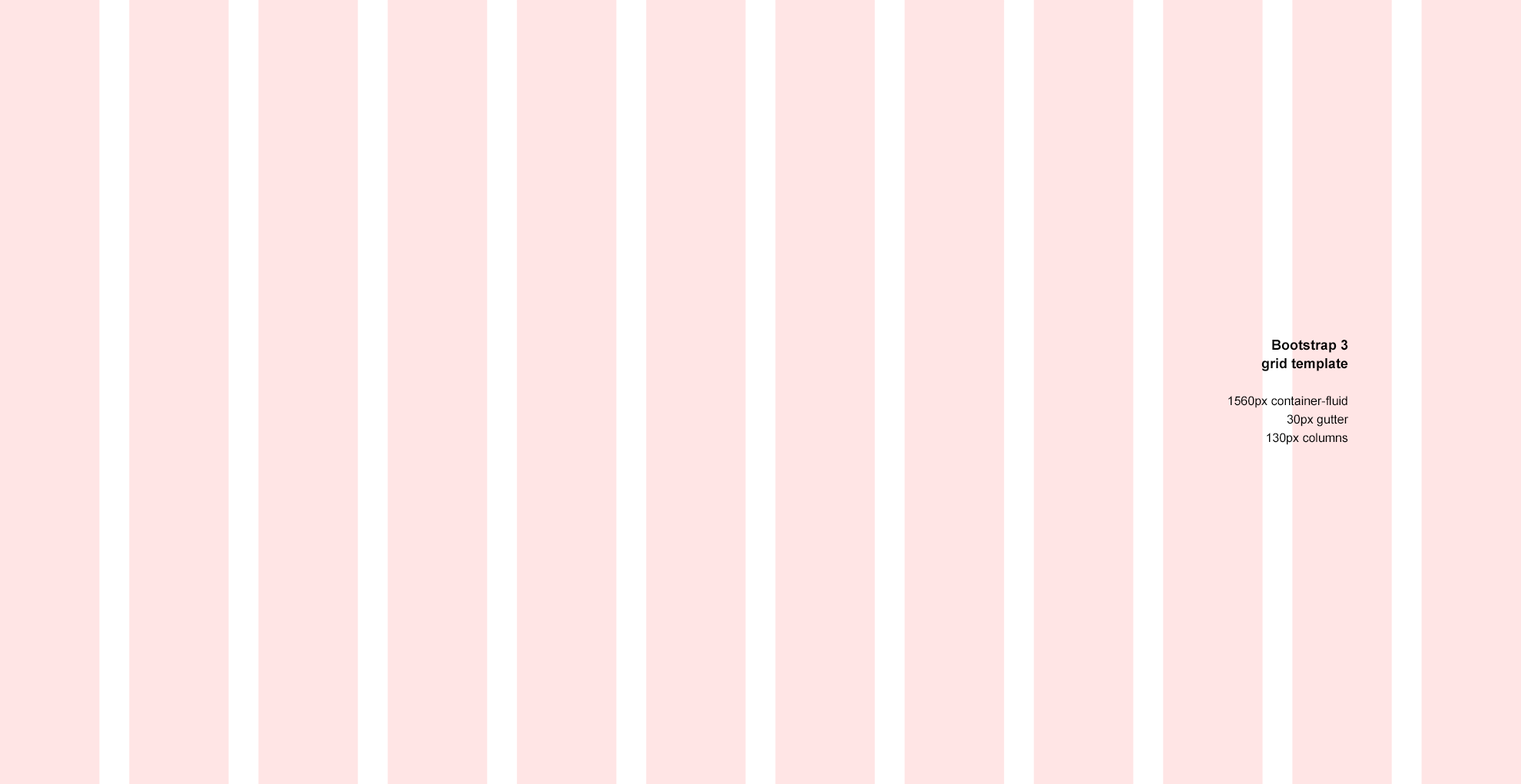
<style>
.page{position:relative;width:1521px;height:784px;background:#ffe5e5}
.page>*{position:absolute;margin:0}
.t1{font:12.3px/18.4px "ArialMT";color:#000000}
.t2{font:13.8px/18.4px "Arial-BoldMT";color:#000000}
</style>
<div class="page">
<p class="t1" style="left:1229px;top:340px;width:120px;height:105px;text-align:right"><span class="t2">Bootstrap 3<br>grid template<br><br></span>1560px container-fluid<br>30px gutter<br>130px columns</p>
</div>
